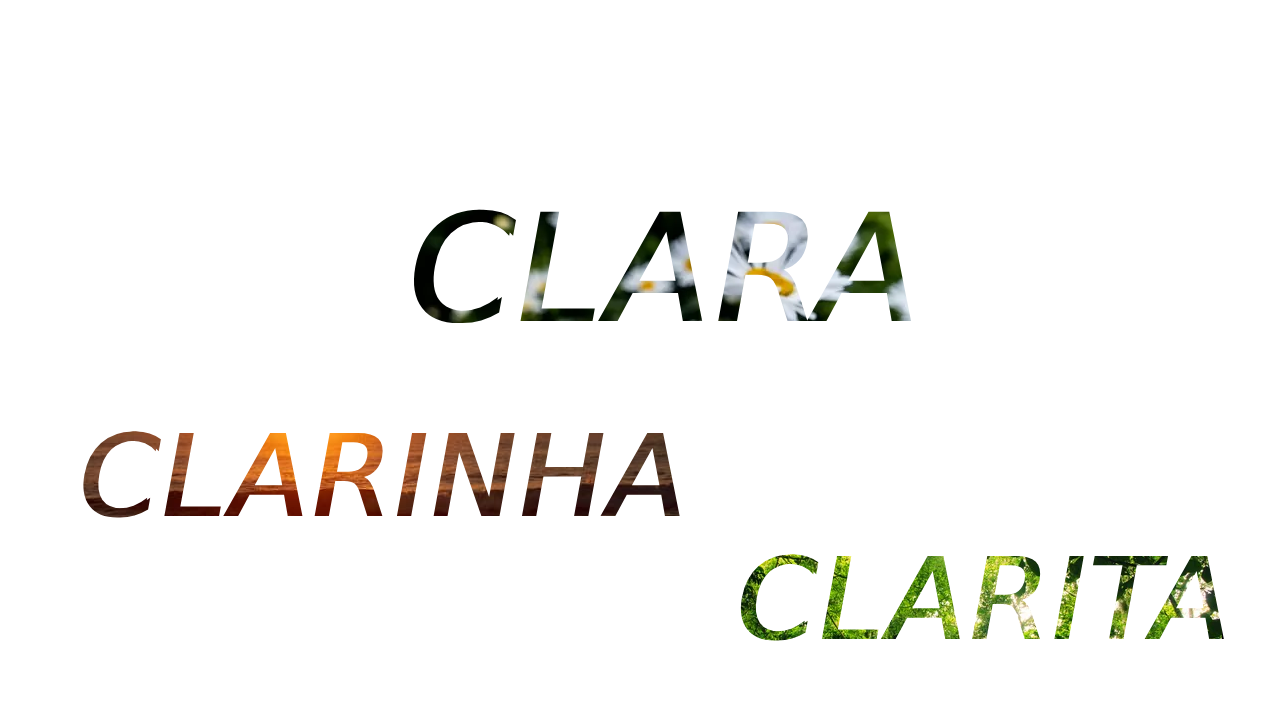
<style>
.page{position:relative;width:1280px;height:720px;background:#ffffff}
.page>*{position:absolute;margin:0}
.t1{font:150px "DejaVuSans";font-weight:bold;font-style:italic}
.t2{font:114px "DejaVuSans";font-weight:bold;font-style:italic}
</style>
<div class="page">
<p class="t1" style="left:410px;top:209px;width:502px;height:115px">CLARA</p>
<p class="t2" style="left:80px;top:431px;width:600px;height:87px">CLARINHA</p>
<p class="t2" style="left:738px;top:554px;width:486px;height:87px">CLARITA</p>
</div>
